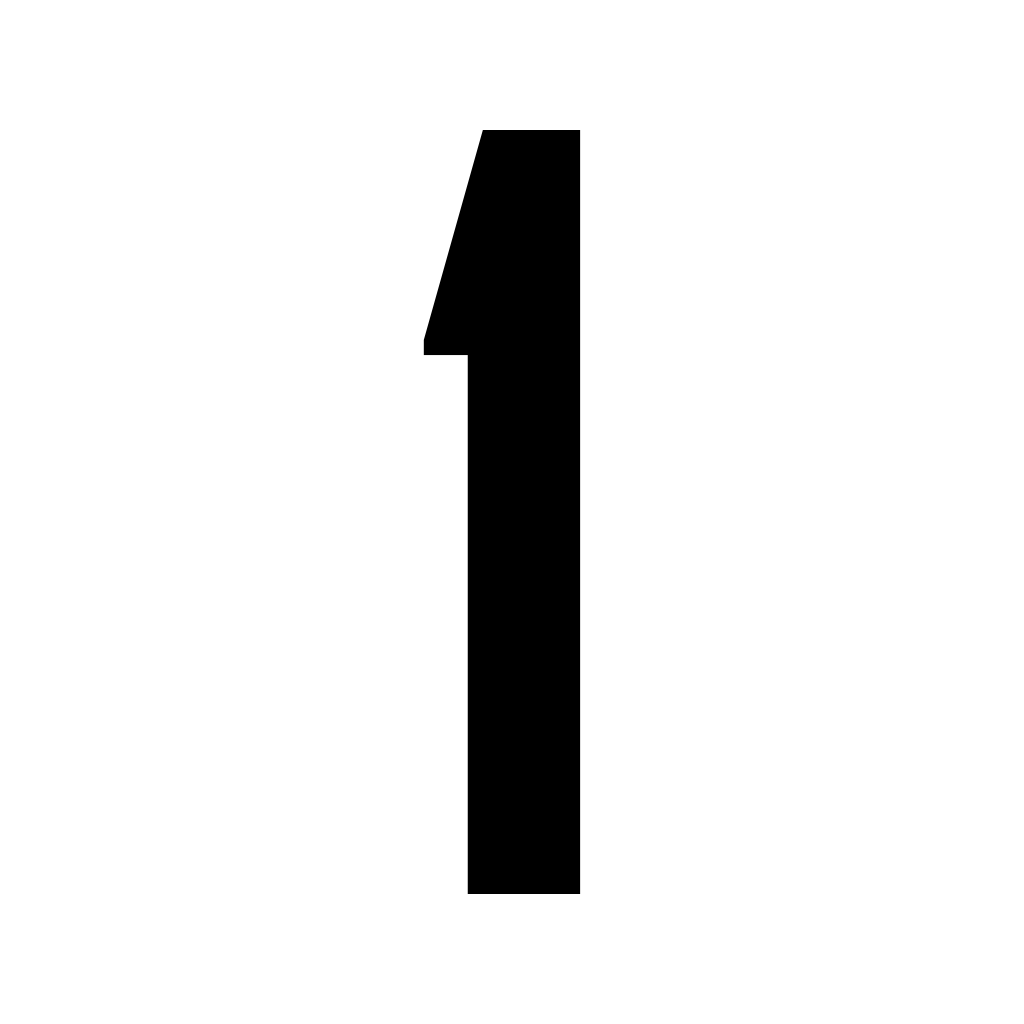
<style>
.page{position:relative;width:1024px;height:1024px;background:#ffffff}
.page>*{position:absolute;margin:0}
.t1{font:1000px "AgencyFB-Bold";color:#000000}
</style>
<div class="page">
<p class="t1" style="left:423px;top:130px;width:158px;height:764px">1</p>
</div>
